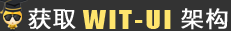
<style>
.page{position:relative;width:231px;height:31px;background:#333333}
.page>*{position:absolute;margin:0}
.t1{font:21.6px "MicrosoftYaHeiUI";letter-spacing:0.1em;color:#ffffff;font-weight:bold}
.t2{font:18.4px "Impact";letter-spacing:0.1em;color:#ffe56d;scale:1.13 1}
</style>
<div class="page">
<p class="t1" style="left:28px;top:8px;width:200px;height:22px">获取           架构</p>
<p class="t2" style="left:82px;top:10px;width:89px;height:19px">WIT-UI</p>
</div>
